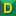
<style>
.page{position:relative;width:16px;height:16px;background:#0b7f47}
.page>*{position:absolute;margin:0}
.t1{font:12px "Track";color:#ead518}
</style>
<div class="page">
<p class="t1" style="left:4px;top:3px;width:8px;height:10px">D</p>
</div>
